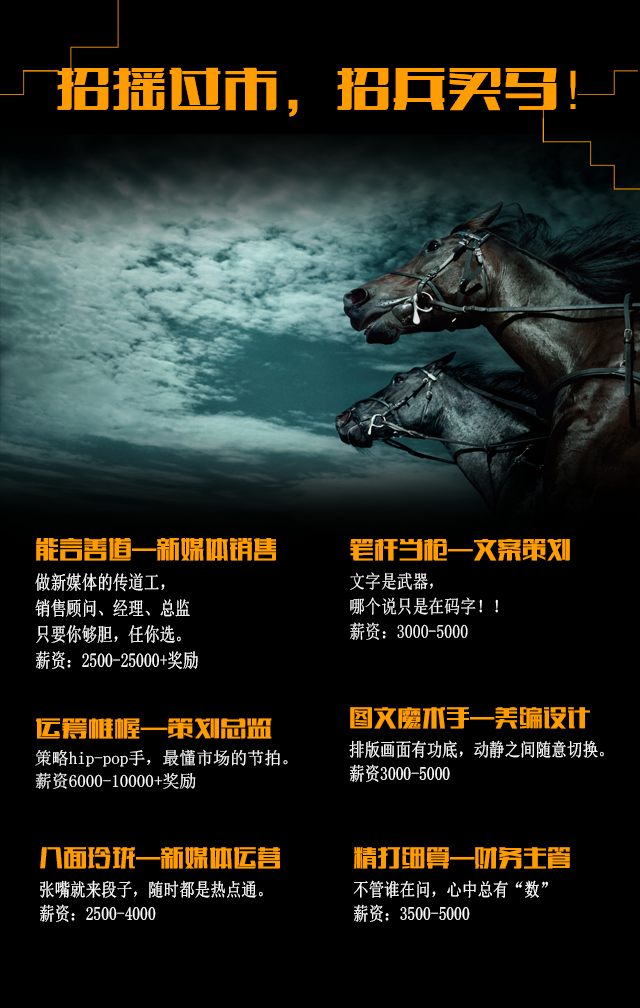
<style>
.page{position:relative;width:640px;height:1008px;background:#000000}
.page>*{position:absolute;margin:0}
.t1{font:56px "FZCTHJW--GB1-0";color:#ff9c00}
.t2{font:19.4px/25.8px "SimSun";color:#ffffff;scale:0.8 1}
.t3{font:30.1px/38.7px "FZCTHJW--GB1-0";color:#ff9c00;scale:0.8 1}
.t4{font:18.7px/24.9px "SimSun";color:#ffffff;scale:0.85 1}
.t5{font:29.1px/37.4px "FZCTHJW--GB1-0";color:#ff9c00;scale:0.85 1}
.t6{font:18.4px/24.5px "SimSun";color:#ffffff;scale:0.85 1}
.t7{font:28.6px/36.8px "FZCTHJW--GB1-0";color:#ff9c00;scale:0.85 1}
.t8{font:17.1px/22.8px "SimSun";color:#ffffff}
.t9{font:26.6px/34.3px "FZCTHJW--GB1-0";color:#ff9c00}
</style>
<div class="page">
<p class="t1" style="left:57px;top:67px;width:519px;height:50px">招摇过市，招兵买马！</p>
<p class="t2" style="left:35px;top:538px;width:241px;height:131px"><span class="t3">能言善道—新媒体销售<br></span>做新媒体的传道工，<br>销售顾问、经理、总监<br>只要你够胆，任你选。<br>薪资：2500-25000+奖励</p>
<p class="t4" style="left:350px;top:539px;width:220px;height:101px"><span class="t5">笔杆当枪—文案策划<br></span>文字是武器，<br>哪个说只是在码字！！<br>薪资：3000-5000</p>
<p class="t6" style="left:349px;top:707px;width:255px;height:75px"><span class="t7">图文魔术手—美编设计<br></span>排版画面有功底，动静之间随意切换。<br>薪资3000-5000</p>
<p class="t8" style="left:35px;top:718px;width:253px;height:71px"><span class="t9">运筹帷幄—策划总监<br></span>策略hip-pop手，最懂市场的节拍。<br>薪资6000-10000+奖励</p>
<p class="t6" style="left:40px;top:847px;width:240px;height:75px"><span class="t7">八面玲珑—新媒体运营<br></span>张嘴就来段子，随时都是热点通。<br>薪资：2500-4000</p>
<p class="t6" style="left:353px;top:847px;width:217px;height:75px"><span class="t7">精打细算—财务主管<br></span>不管谁在问，心中总有“数”<br>薪资：3500-5000</p>
</div>
